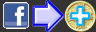
<style>
.page{position:relative;width:96px;height:32px;background:#333333}
.page>*{position:absolute;margin:0}
.t1{font:33.9px "Arial-Black"}
</style>
<div class="page">
<p class="t1" style="left:71px;top:7px;width:18px;height:18px">+</p>
</div>
